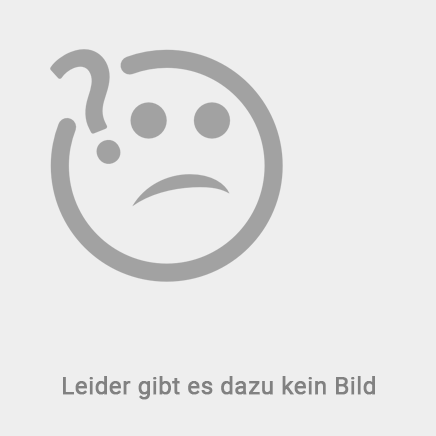
<style>
.page{position:relative;width:436px;height:436px;background:#eeeeee}
.page>*{position:absolute;margin:0}
.t1{font:24px "Roboto-Regular";color:#818181;font-weight:bold}
</style>
<div class="page">
<p class="t1" style="left:63px;top:376px;width:312px;height:24px">Leider gibt es dazu kein Bild</p>
</div>
